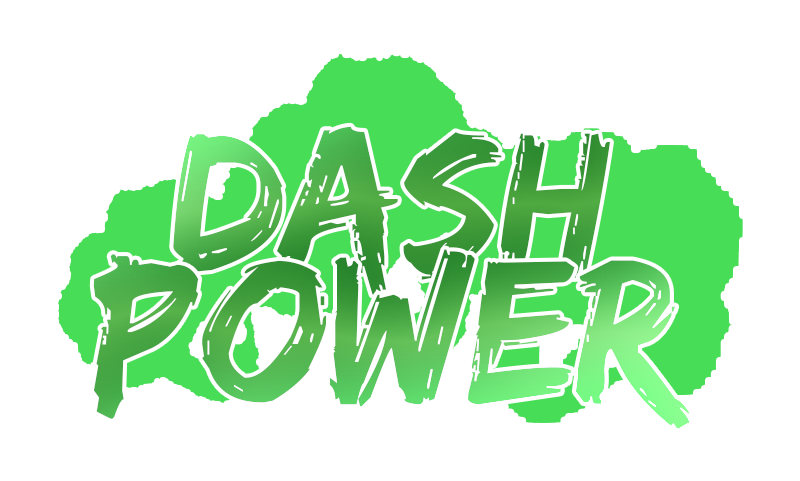
<style>
.page{position:relative;width:800px;height:481px;background:#ffffff}
.page>*{position:absolute;margin:0}
.t1{font:201.6px "EdoSZ";color:#47a53f}
.t2{font:212.6px "EdoSZ"}
</style>
<div class="page">
<p class="t1" style="left:173px;top:126px;width:437px;height:169px">DASH</p>
<p class="t2" style="left:93px;top:249px;width:597px;height:180px">POWER</p>
</div>
